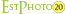
<style>
.page{position:relative;width:65px;height:14px;background:#ffffff}
.page>*{position:absolute;margin:0}
.t1{font:12.3px "TrajanPro-Regular";color:#99cc33}
.t2{font:8.2px "TrajanPro-Regular";color:#99cc33}
.t3{font:16.4px "TrajanPro-Regular";color:#99cc33}
</style>
<div class="page">
<p class="t1" style="left:1px;top:0px;width:8px;height:13px">E</p>
<p class="t2" style="left:9px;top:4px;width:10px;height:6px">st</p>
<p class="t3" style="left:18px;top:1px;width:9px;height:13px">P</p>
<p class="t2" style="left:27px;top:4px;width:26px;height:6px">hoto</p>
</div>
